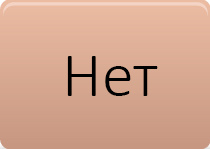
<style>
.page{position:relative;width:210px;height:149px}
.page>*{position:absolute;margin:0}
.t1{font:64px "Calibri-Light";color:#000000}
</style>
<div class="page">
<p class="t1" style="left:67px;top:56px;width:91px;height:40px">Нет</p>
</div>
